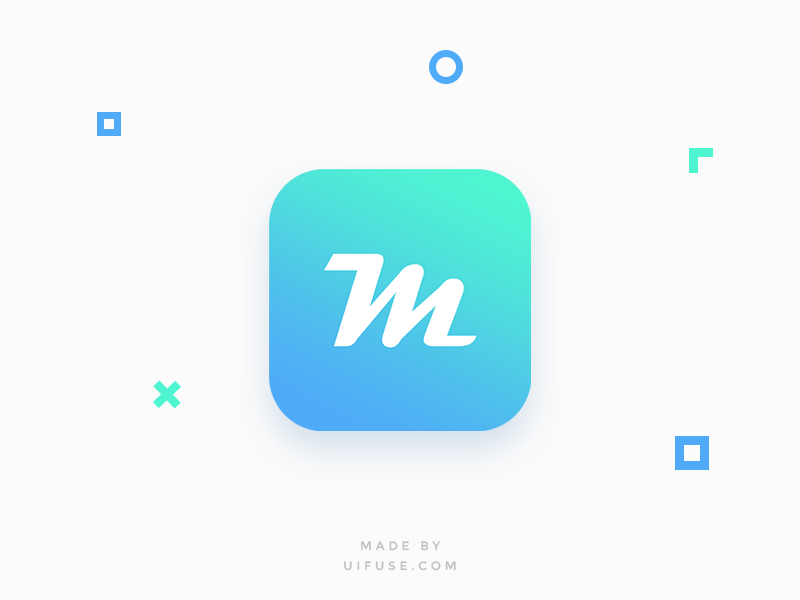
<style>
.page{position:relative;width:800px;height:600px;background:#fbfbfb}
.page>*{position:absolute;margin:0}
.t1{font:12.1px/20px "Montserrat-Regular";letter-spacing:0.31em;color:#c0c0c0;text-transform:uppercase}
</style>
<div class="page">
<p class="t1" style="left:344px;top:541px;width:112px;height:30px;text-align:center">Made By<br>uifuse.com</p>
</div>
